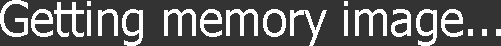
<style>
.page{position:relative;width:501px;height:46px;background:#333333}
.page>*{position:absolute;margin:0}
.t1{font:48px "Tahoma";color:#ffffff;scale:0.96 1}
</style>
<div class="page">
<p class="t1" style="left:0px;top:0px;width:501px;height:46px">Getting memory image...</p>
</div>
